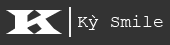
<style>
.page{position:relative;width:170px;height:45px;background:#333333}
.page>*{position:absolute;margin:0}
.t1{font:36px "LatinWide";color:#ffffff}
.t2{font:18px "CourierNewPSMT";color:#ffffff}
</style>
<div class="page">
<p class="t1" style="left:6px;top:10px;width:56px;height:24px">K</p>
<p class="t2" style="left:78px;top:15px;width:85px;height:15px">Kỳ Smile</p>
</div>
